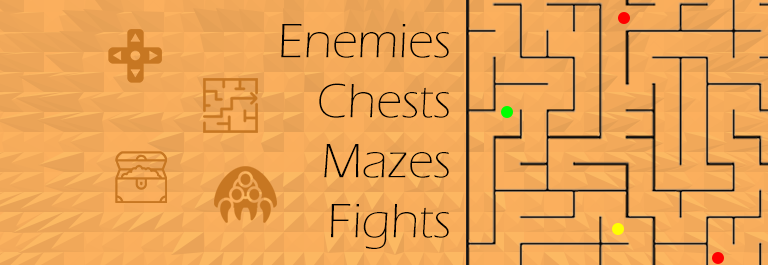
<style>
.page{position:relative;width:768px;height:265px}
.page>*{position:absolute;margin:0}
.t1{font:50px "ErasITC-Light";color:#000000}
</style>
<div class="page">
<p class="t1" style="left:281px;top:24px;width:168px;height:225px;text-align:right">Enemies<br>Chests<br>Mazes<br>Fights</p>
</div>
